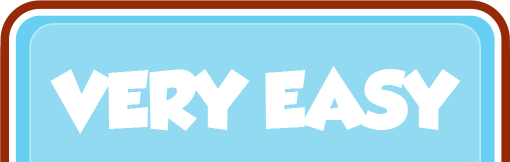
<style>
.page{position:relative;width:510px;height:162px;background:#91daf2}
.page>*{position:absolute;margin:0}
.t1{font:72px "GROBOLD";letter-spacing:-0.02em;color:#ffffff}
</style>
<div class="page">
<p class="t1" style="left:50px;top:66px;width:411px;height:68px">VERY EASY</p>
</div>
